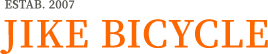
<style>
.page{position:relative;width:268px;height:54px;background:#ffffff}
.page>*{position:absolute;margin:0}
.t1{font:11px "NotoSerifCJKkr-SemiBold";letter-spacing:0.03em;color:#595a54;text-transform:uppercase}
.t2{font:37px "NotoSerifCJKkr-SemiBold";letter-spacing:0.03em;color:#fe6700;text-transform:uppercase}
</style>
<div class="page">
<p class="t1" style="left:5px;top:0px;width:70px;height:9px">Estab. 2007</p>
<p class="t2" style="left:0px;top:19px;width:268px;height:35px">jike bicycle</p>
</div>
